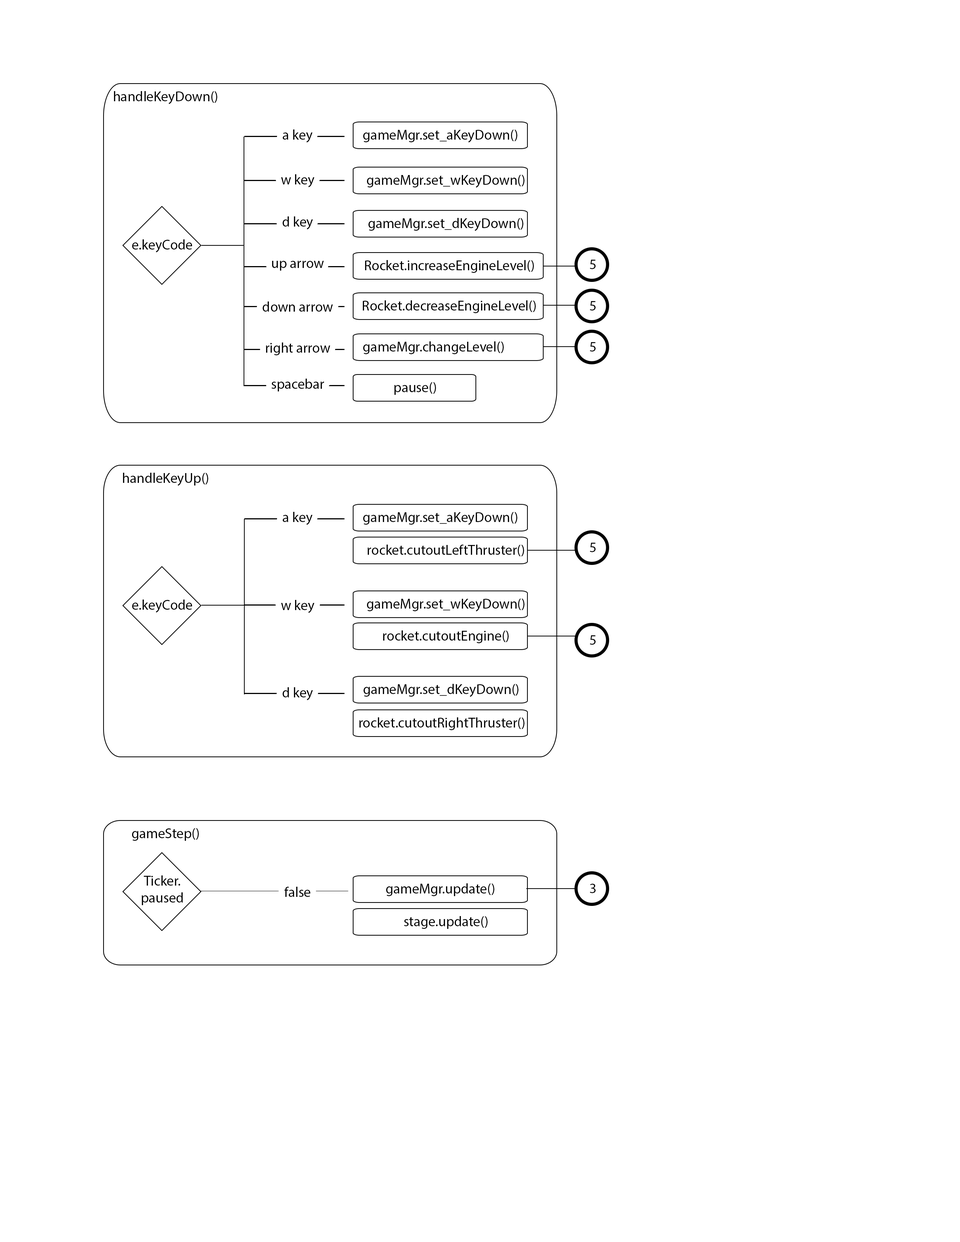
<style>
.page{position:relative;width:960px;height:1242px;background:#ffffff}
.page>*{position:absolute;margin:0}
.t1{font:14.1px "MyriadPro-Regular";color:#000000}
</style>
<div class="page">
<p class="t1" style="left:114px;top:91px;width:103px;height:13px">handleKeyDown()</p>
<p class="t1" style="left:283px;top:129px;width:29px;height:14px">a key</p>
<p class="t1" style="left:363px;top:129px;width:154px;height:14px">gameMgr.set_aKeyDown()</p>
<p class="t1" style="left:281px;top:174px;width:33px;height:13px">w key</p>
<p class="t1" style="left:367px;top:175px;width:157px;height:13px">gameMgr.set_wKeyDown()</p>
<p class="t1" style="left:282px;top:216px;width:31px;height:14px">d key</p>
<p class="t1" style="left:368px;top:218px;width:155px;height:13px">gameMgr.set_dKeyDown()</p>
<p class="t1" style="left:132px;top:239px;width:60px;height:14px">e.keyCode</p>
<p class="t1" style="left:272px;top:261px;width:52px;height:10px">up arrow</p>
<p class="t1" style="left:365px;top:260px;width:169px;height:13px">Rocket.increaseEngineLevel()</p>
<p class="t1" style="left:590px;top:260px;width:6px;height:9px">5</p>
<p class="t1" style="left:262px;top:302px;width:71px;height:10px">down arrow</p>
<p class="t1" style="left:363px;top:300px;width:173px;height:13px">Rocket.decreaseEngineLevel()</p>
<p class="t1" style="left:590px;top:301px;width:6px;height:10px">5</p>
<p class="t1" style="left:363px;top:341px;width:141px;height:13px">gameMgr.changeLevel()</p>
<p class="t1" style="left:266px;top:343px;width:64px;height:12px">right arrow</p>
<p class="t1" style="left:590px;top:342px;width:6px;height:10px">5</p>
<p class="t1" style="left:271px;top:379px;width:53px;height:12px">spacebar</p>
<p class="t1" style="left:394px;top:382px;width:42px;height:13px">pause()</p>
<p class="t1" style="left:123px;top:473px;width:85px;height:13px">handleKeyUp()</p>
<p class="t1" style="left:283px;top:512px;width:29px;height:13px">a key</p>
<p class="t1" style="left:363px;top:512px;width:154px;height:13px">gameMgr.set_aKeyDown()</p>
<p class="t1" style="left:367px;top:545px;width:157px;height:11px">rocket.cutoutLeftThruster()</p>
<p class="t1" style="left:590px;top:543px;width:6px;height:9px">5</p>
<p class="t1" style="left:132px;top:600px;width:60px;height:13px">e.keyCode</p>
<p class="t1" style="left:281px;top:600px;width:33px;height:13px">w key</p>
<p class="t1" style="left:367px;top:599px;width:157px;height:13px">gameMgr.set_wKeyDown()</p>
<p class="t1" style="left:383px;top:631px;width:126px;height:12px">rocket.cutoutEngine()</p>
<p class="t1" style="left:590px;top:635px;width:6px;height:10px">5</p>
<p class="t1" style="left:282px;top:687px;width:31px;height:14px">d key</p>
<p class="t1" style="left:363px;top:684px;width:155px;height:13px">gameMgr.set_dKeyDown()</p>
<p class="t1" style="left:359px;top:717px;width:165px;height:13px">rocket.cutoutRightThruster()</p>
<p class="t1" style="left:132px;top:828px;width:67px;height:13px">gameStep()</p>
<p class="t1" style="left:142px;top:876px;width:41px;height:29px;text-align:center">Ticker.<br>paused</p>
<p class="t1" style="left:284px;top:887px;width:27px;height:10px">false</p>
<p class="t1" style="left:386px;top:883px;width:108px;height:13px">gameMgr.update()</p>
<p class="t1" style="left:590px;top:884px;width:6px;height:9px">3</p>
<p class="t1" style="left:404px;top:916px;width:83px;height:13px">stage.update()</p>
</div>
